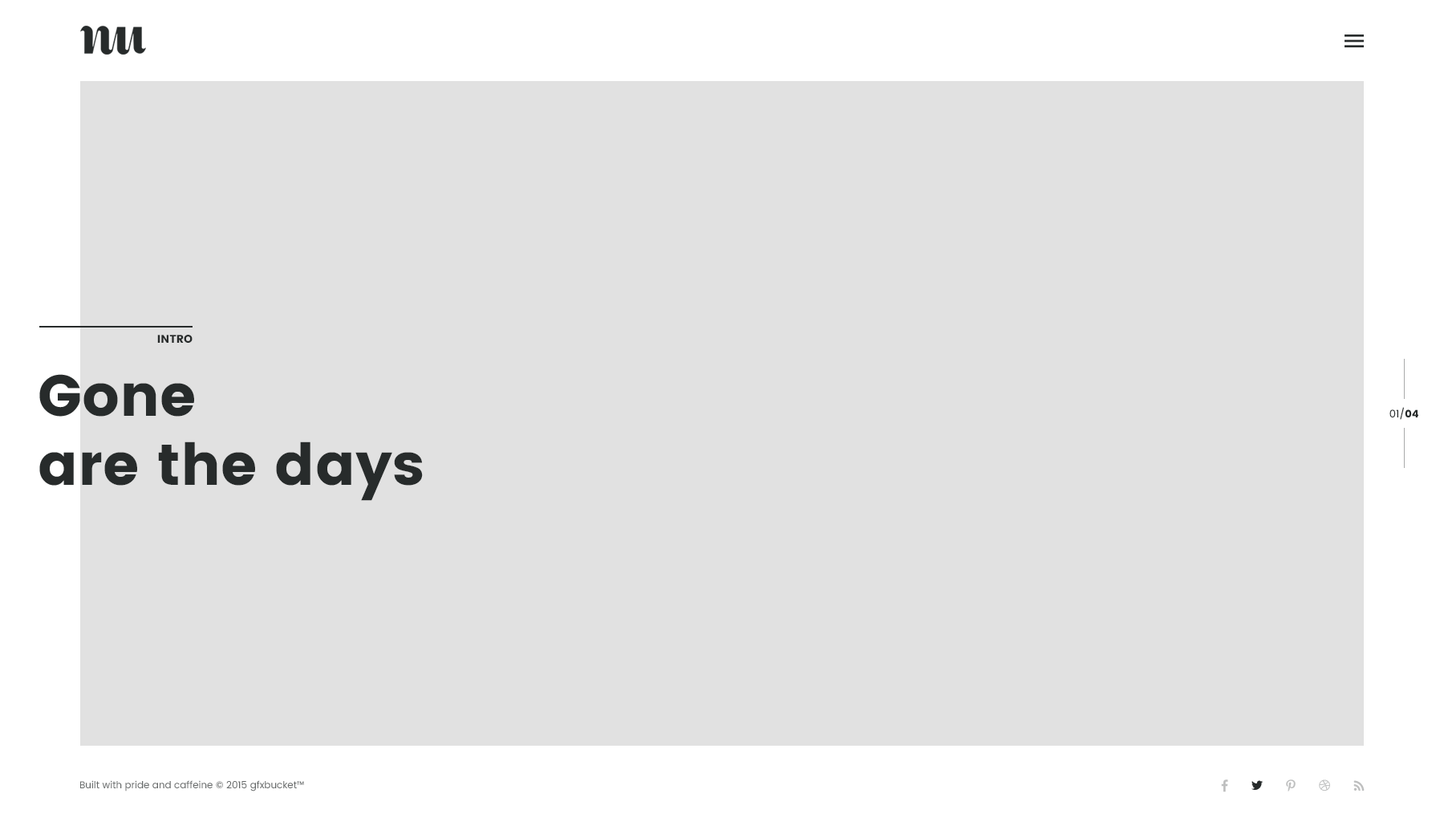
<style>
.page{position:relative;width:1444px;height:826px;background:#e1e1e1}
.page>*{position:absolute;margin:0}
.t1{font:11.2px "Poppins";color:#272b2b;text-transform:uppercase}
.t2{font:57.8px "Poppins";color:#272b2b}
.t3{font:10.4px "Poppins-Regular";color:#272b2b}
.t4{font:10.4px "Poppins";color:#272b2b}
.t5{font:9.6px "Poppins-Regular";color:#676a6a}
</style>
<div class="page">
<p class="t1" style="left:157px;top:335px;width:36px;height:8px">Intro</p>
<p class="t2" style="left:39px;top:374px;width:384px;height:127px">Gone<br>are the days</p>
<p class="t3" style="left:1390px;top:407px;width:29px;height:13px">01/<span class="t4">04</span></p>
<p class="t5" style="left:80px;top:780px;width:224px;height:11px">Built with pride and caffeine © 2015 gfxbucket™</p>
</div>
